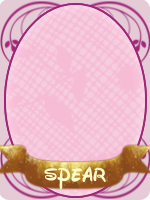
<style>
.page{position:relative;width:150px;height:200px}
.page>*{position:absolute;margin:0}
.t1{font:37.4px "Waltograph";color:#fcfac7}
</style>
<div class="page">
<p class="t1" style="left:44px;top:166px;width:62px;height:23px">spear</p>
</div>
